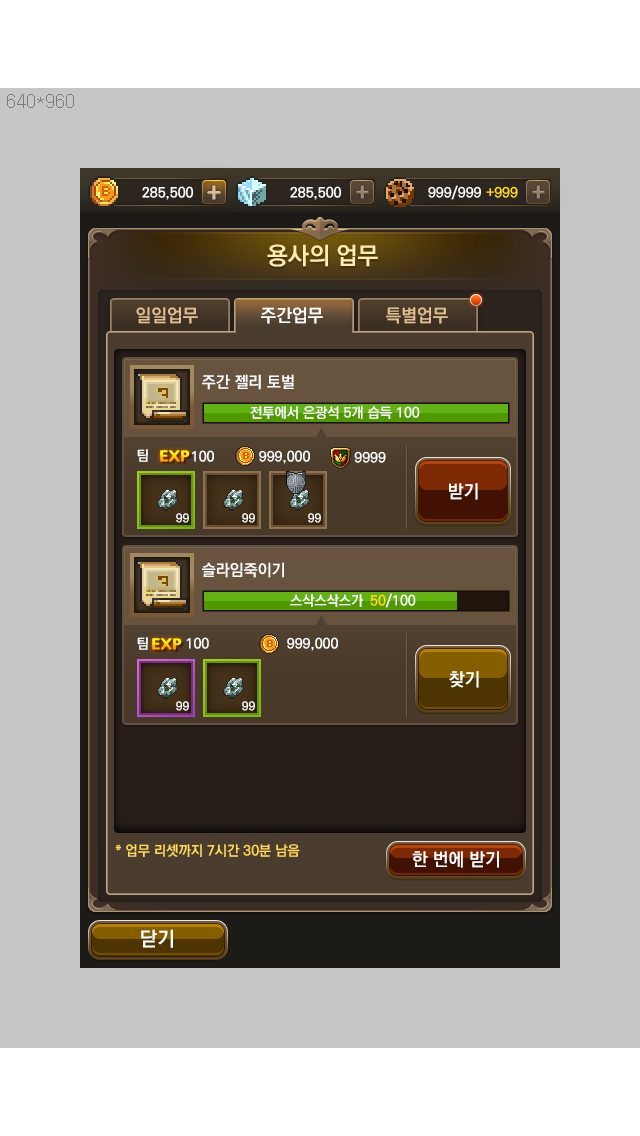
<style>
.page{position:relative;width:640px;height:1136px;background:#c6c6c6}
.page>*{position:absolute;margin:0}
.t1{font:24px "KoPubDotumBold";color:#ffedab}
.t2{font:18px "KoPubDotumBold";color:#e0c093}
.t3{font:18px "KoPubDotumBold";color:#ffffff}
.t4{font:16px "KoPubDotumBold";color:#ffffff}
.t5{font:14px "KoPubDotumBold";color:#ffffff}
.t6{font:14px "NanumGothicExtraBold";scale:1.2 1}
.t7{font:12px "KoPubDotumBold";color:#ffffff}
.t8{font:14px "KoPubDotumBold";color:#ffdb19}
.t9{font:14px "KoPubDotumBold";color:#ffda5b}
.t10{font:20px "KoPubDotumBold";color:#ffffff}
</style>
<div class="page">
<p class="t1" style="left:267px;top:244px;width:111px;height:23px">용사의 업무</p>
<p class="t2" style="left:136px;top:307px;width:62px;height:17px">일일업무</p>
<p class="t3" style="left:261px;top:307px;width:62px;height:17px">주간업무</p>
<p class="t2" style="left:386px;top:307px;width:62px;height:17px">특별업무</p>
<p class="t4" style="left:202px;top:374px;width:92px;height:16px">주간 젤리 토벌</p>
<p class="t5" style="left:250px;top:406px;width:142px;height:13px">전투에서 은광석 5개 습득</p>
<p class="t5" style="left:397px;top:406px;width:23px;height:12px">100</p>
<p class="t5" style="left:137px;top:449px;width:11px;height:13px">팀</p>
<p class="t6" style="left:160px;top:450px;width:30px;height:12px">EXP</p>
<p class="t5" style="left:192px;top:450px;width:22px;height:12px">100</p>
<p class="t5" style="left:259px;top:450px;width:51px;height:14px">999,000</p>
<p class="t5" style="left:354px;top:451px;width:32px;height:12px">9999</p>
<p class="t3" style="left:449px;top:483px;width:29px;height:17px">받기</p>
<p class="t7" style="left:176px;top:513px;width:13px;height:10px">99</p>
<p class="t7" style="left:242px;top:513px;width:13px;height:10px">99</p>
<p class="t7" style="left:308px;top:513px;width:13px;height:10px">99</p>
<p class="t4" style="left:202px;top:562px;width:82px;height:16px">슬라임죽이기</p>
<p class="t5" style="left:370px;top:593px;width:46px;height:15px"><span class="t8">50</span>/100</p>
<p class="t5" style="left:290px;top:594px;width:73px;height:13px">스삭스삭스가</p>
<p class="t5" style="left:137px;top:637px;width:72px;height:13px">팀         100</p>
<p class="t6" style="left:152px;top:638px;width:30px;height:12px">EXP</p>
<p class="t5" style="left:287px;top:637px;width:51px;height:14px">999,000</p>
<p class="t3" style="left:449px;top:671px;width:30px;height:17px">찾기</p>
<p class="t7" style="left:176px;top:701px;width:13px;height:10px">99</p>
<p class="t7" style="left:242px;top:701px;width:13px;height:10px">99</p>
<p class="t9" style="left:115px;top:844px;width:185px;height:13px">* 업무 리셋까지 7시간 30분 남음</p>
<p class="t3" style="left:412px;top:851px;width:87px;height:17px">한 번에 받기</p>
<p class="t10" style="left:141px;top:929px;width:32px;height:19px">닫기</p>
</div>
